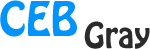
<style>
.page{position:relative;width:150px;height:49px;background:#ffffff}
.page>*{position:absolute;margin:0}
.t1{font:42px "HoboStd";color:#0294fb}
.t2{font:31.5px "HoboStd";color:#2b2b2b}
</style>
<div class="page">
<p class="t1" style="left:0px;top:0px;width:77px;height:37px">CEB</p>
<p class="t2" style="left:84px;top:21px;width:66px;height:28px">Gray</p>
</div>
